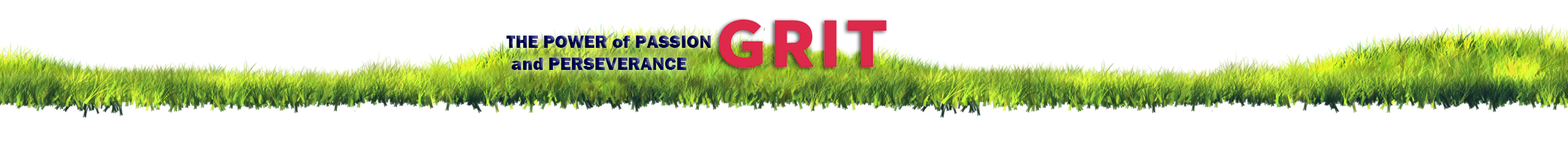
<style>
.page{position:relative;width:1568px;height:149px;background:#ffffff}
.page>*{position:absolute;margin:0}
.t1{font:18.4px "FranklinGothic-Heavy"}
</style>
<div class="page">
<p class="t1" style="left:507px;top:36px;width:204px;height:34px">THE POWER of PASSION<br> and PERSEVERANCE</p>
</div>
